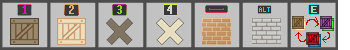
<style>
.page{position:relative;width:350px;height:50px;background:#c2c2c3}
.page>*{position:absolute;margin:0}
.t1{font:12px "Terminal";color:#d811be;font-weight:bold}
.t2{font:12px "Terminal";color:#d8af87;font-weight:bold}
.t3{font:12px "Terminal";color:#92d126;font-weight:bold}
.t4{font:12px "Terminal";color:#d8d8d8;font-weight:bold}
.t5{font:8px "Terminal";color:#8ee6ba;font-weight:bold}
.t6{font:5px "Terminal";color:#0edada;font-weight:bold}
</style>
<div class="page">
<p class="t1" style="left:22px;top:5px;width:5px;height:9px">1</p>
<p class="t2" style="left:69px;top:5px;width:5px;height:9px">2</p>
<p class="t3" style="left:117px;top:5px;width:5px;height:9px">3</p>
<p class="t4" style="left:167px;top:5px;width:5px;height:9px">4</p>
<p class="t5" style="left:311px;top:6px;width:6px;height:7px">E</p>
<p class="t6" style="left:259px;top:7px;width:11px;height:5px">ALT</p>
</div>
